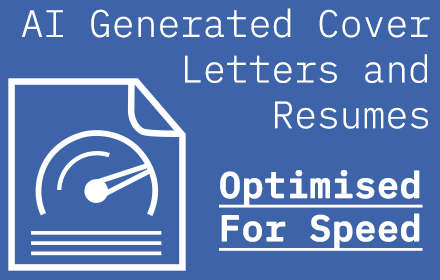
<style>
.page{position:relative;width:440px;height:280px;background:#3d64a9}
.page>*{position:absolute;margin:0}
.t1{font:38px "IBMPlexMono-Light";color:#ffffff}
.t2{font:36px "IBMPlexMono-Medium";color:#ffffff;font-weight:bold;text-decoration:underline}
</style>
<div class="page">
<p class="t1" style="left:22px;top:8px;width:408px;height:121px;text-align:right">AI Generated Cover Letters and <br>Resumes</p>
<p class="t2" style="left:219px;top:170px;width:204px;height:81px;text-align:right">Optimised For Speed</p>
</div>
